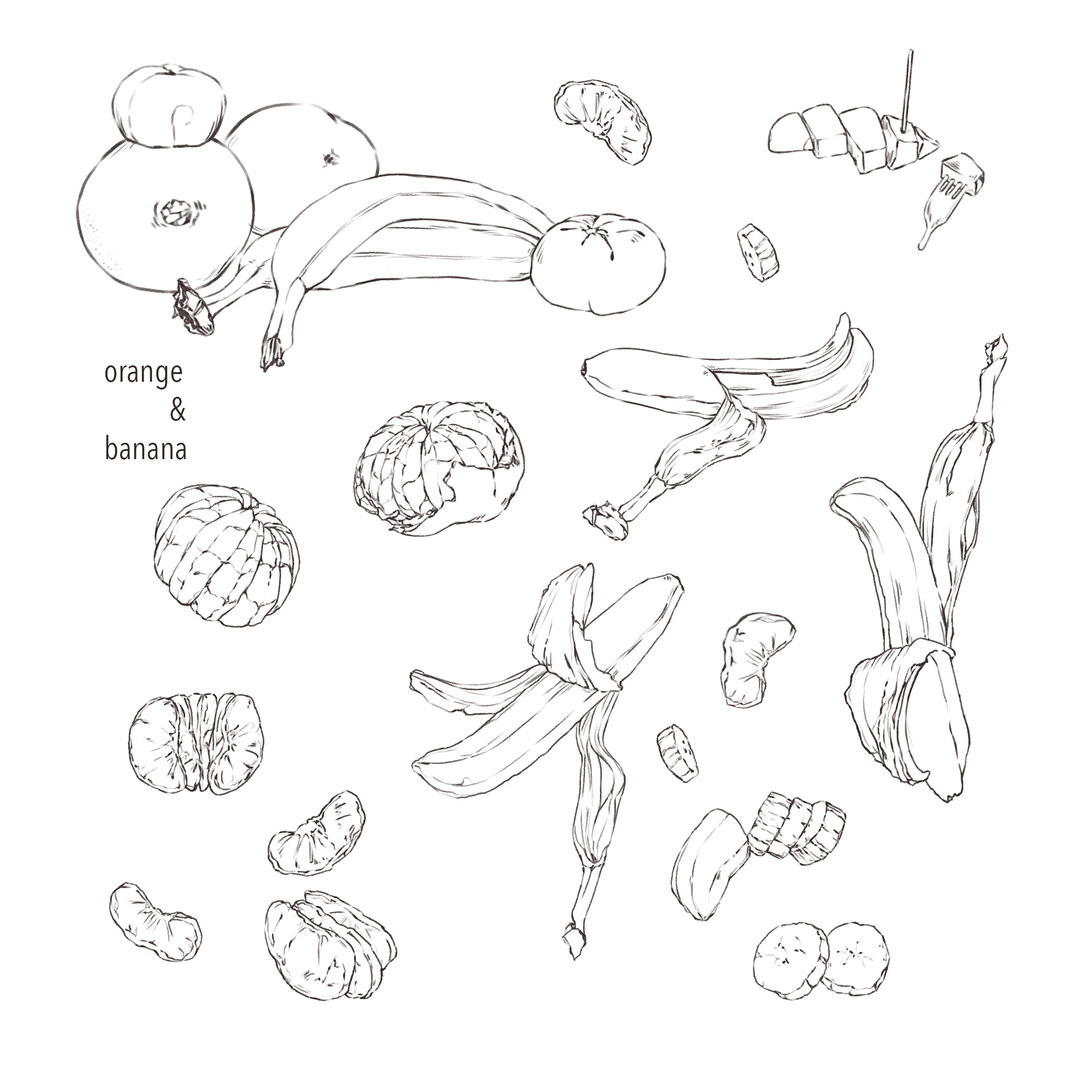
<style>
.page{position:relative;width:1092px;height:1092px;background:#ffffff}
.page>*{position:absolute;margin:0}
.t1{font:32.2px "AvenirNextCondensed-Regular";color:#352929}
</style>
<div class="page">
<p class="t1" style="left:105px;top:365px;width:81px;height:95px">orange <br>    &amp;<br>banana</p>
</div>
